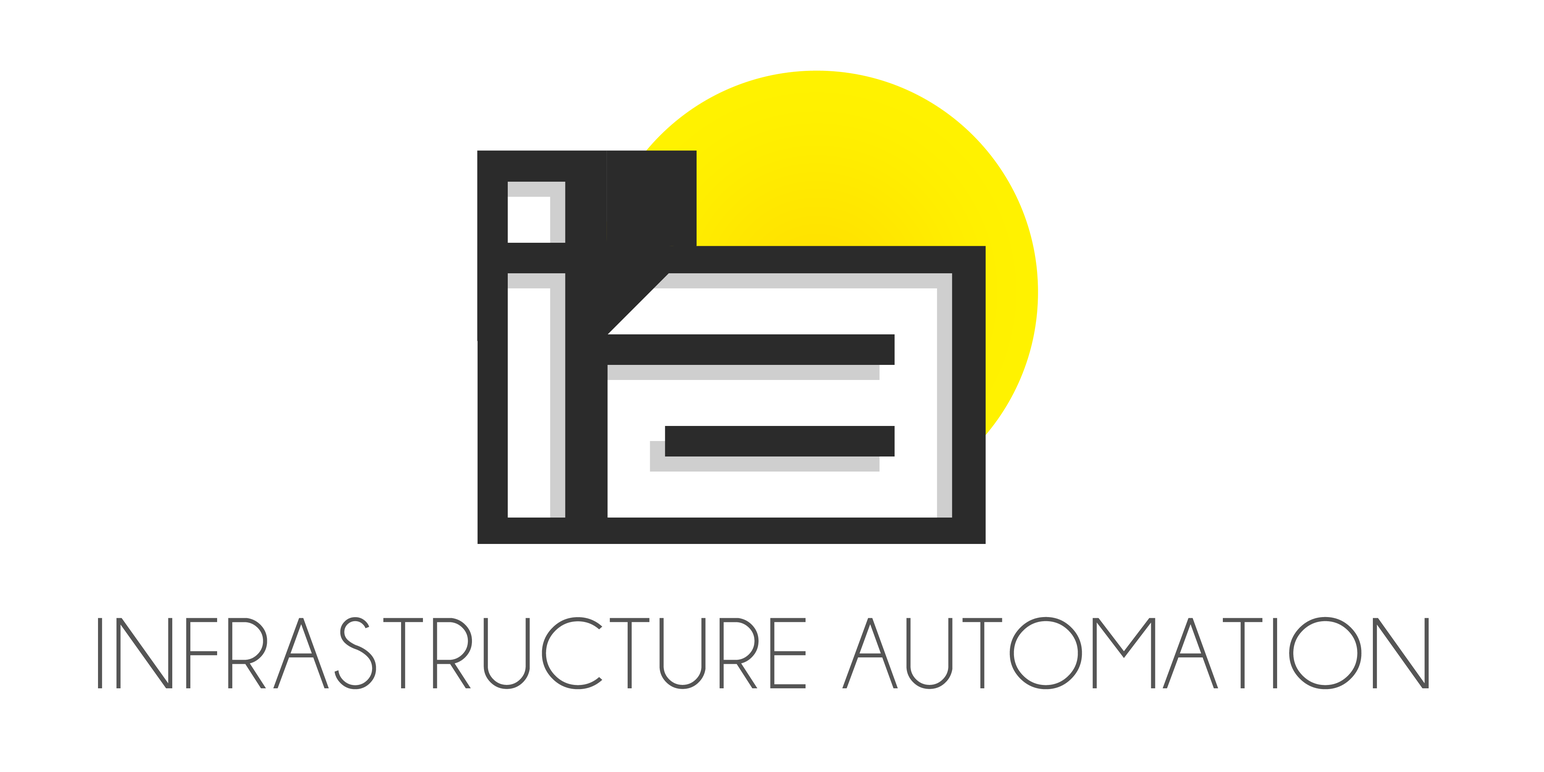
<style>
.page{position:relative;width:1544px;height:772px;background:#ffffff}
.page>*{position:absolute;margin:0}
.t1{font:101.8px "Champagne&Limousines";letter-spacing:0.03em;color:#555555}
</style>
<div class="page">
<p class="t1" style="left:98px;top:617px;width:1331px;height:73px">INFRASTRUCTURE AUTOMATION</p>
</div>
